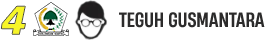
<style>
.page{position:relative;width:265px;height:40px;background:#ffffff}
.page>*{position:absolute;margin:0}
.t1{font:40.1px "Humanist777BT-BlackItalicB";color:#f7f528;text-transform:uppercase}
.t2{font:19.4px "HeadingNowTrial-55Medium";color:#2c2b2b;text-transform:uppercase}
</style>
<div class="page">
<p class="t1" style="left:1px;top:6px;width:25px;height:29px">4</p>
<p class="t2" style="left:119px;top:12px;width:146px;height:16px">teguh gusmantara</p>
</div>
